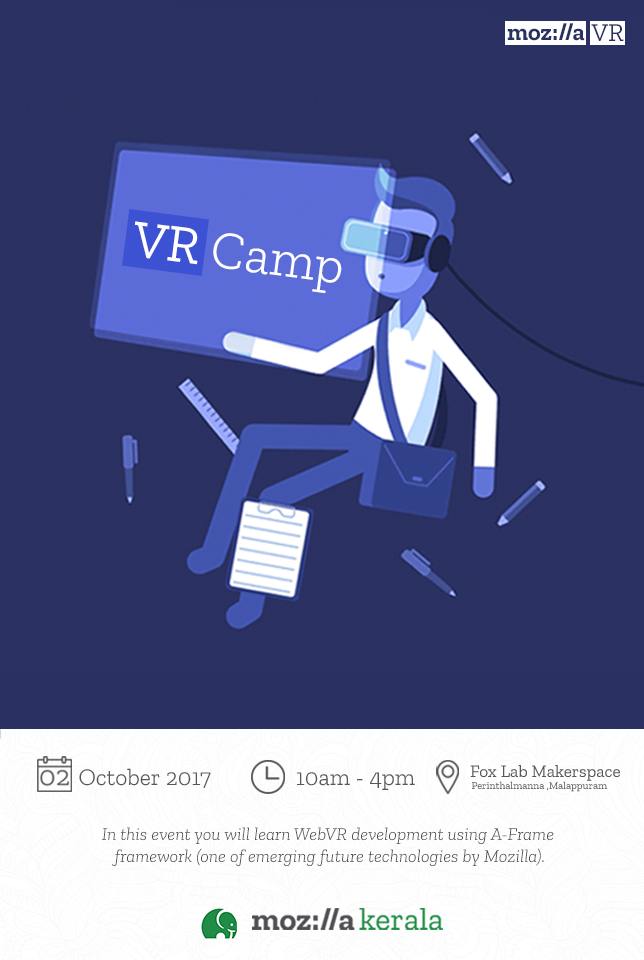
<style>
.page{position:relative;width:644px;height:960px;background:#2a3162}
.page>*{position:absolute;margin:0}
.t1{font:53.6px "ZillaSlab-Light";color:#fefefe}
.t2{font:53.6px "ZillaSlabRegular";color:#fefefe}
.t3{font:23.8px "ZillaSlab-Light";color:#4d4e53}
.t4{font:17.4px "ZillaSlabRegular";color:#4d4e53}
.t5{font:10.4px "ZillaSlabRegular";color:#58585d}
.t6{font:18px "ZillaSlab-LightItalic";color:#4d4e53}
</style>
<div class="page">
<p class="t1" style="left:134px;top:221px;width:208px;height:73px;rotate:8deg"><span class="t2">VR </span>Camp</p>
<p class="t3" style="left:79px;top:768px;width:132px;height:20px">October 2017</p>
<p class="t3" style="left:297px;top:772px;width:118px;height:18px">10am - 4pm</p>
<p class="t4" style="left:470px;top:765px;width:150px;height:16px">Fox Lab Makerspace</p>
<p class="t5" style="left:472px;top:781px;width:135px;height:11px">Perinthalmanna ,Malappuram</p>
<p class="t6" style="left:102px;top:827px;width:452px;height:40px;text-align:center">In this event you will learn WebVR development using A-Frame <br>framework (one of emerging future technologies by Mozilla).</p>
</div>
